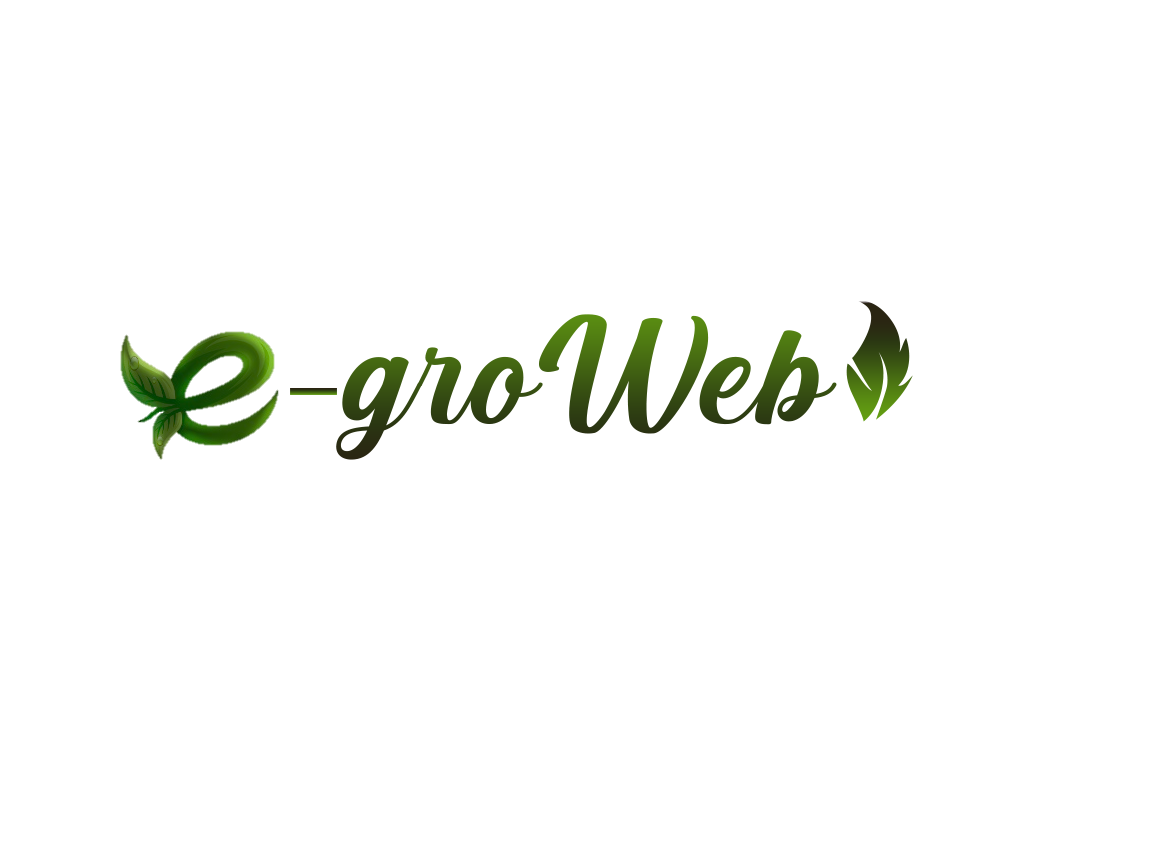
<style>
.page{position:relative;width:1152px;height:864px;background:#ffffff}
.page>*{position:absolute;margin:0}
.t1{font:180px "Leafs"}
.t2{font:190px "CreamCake";scale:1.11 1}
</style>
<div class="page">
<p class="t1" style="left:846px;top:299px;width:67px;height:123px">H</p>
<p class="t2" style="left:336px;top:314px;width:501px;height:146px">groWeb</p>
</div>
